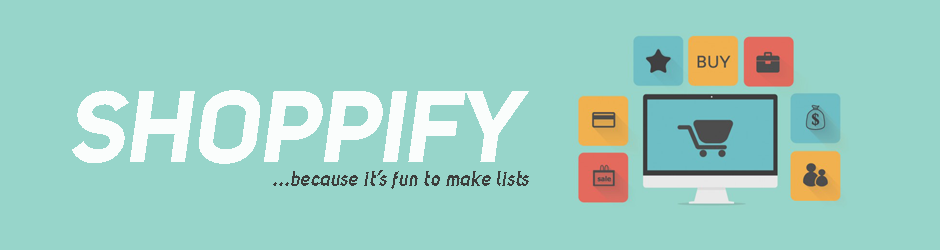
<style>
.page{position:relative;width:940px;height:250px;background:#97d5ca}
.page>*{position:absolute;margin:0}
.t1{font:100px "Uni-Sans-Bold-Italic";color:#fafdfc}
.t2{font:20.8px "Uni-Sans-Bold-Italic";color:#3c3d3b}
</style>
<div class="page">
<p class="t1" style="left:72px;top:90px;width:457px;height:74px">SHOPPIFY</p>
<p class="t2" style="left:273px;top:170px;width:256px;height:19px">...because it’s fun to make lists</p>
</div>
